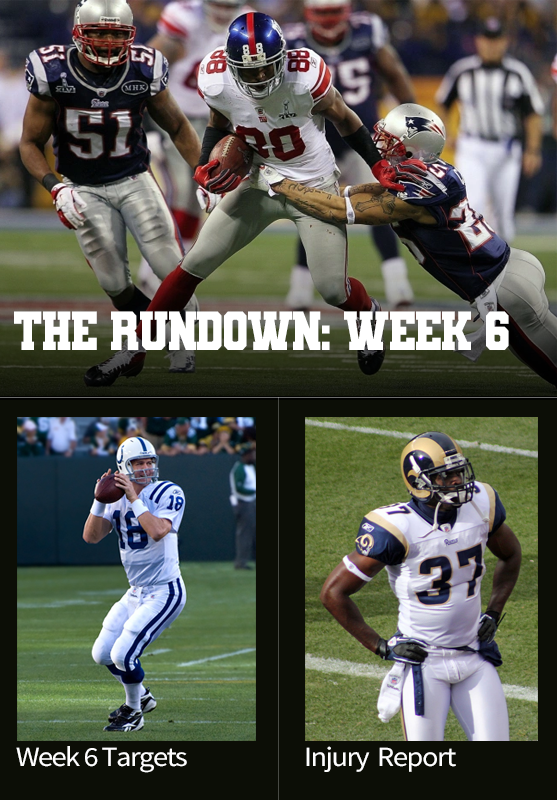
<style>
.page{position:relative;width:557px;height:800px}
.page>*{position:absolute;margin:0}
.t1{font:55px "VarsityTeamBold";letter-spacing:-0.05em;color:#ffffff;text-transform:uppercase;scale:0.92 1}
.t2{font:28px "SourceSansPro-Regular";letter-spacing:-0.05em;color:#ffffff;scale:1.09 1}
</style>
<div class="page">
<p class="t1" style="left:14px;top:311px;width:495px;height:39px">the rundown: week 6</p>
<p class="t2" style="left:16px;top:746px;width:171px;height:27px">Week 6 Targets</p>
<p class="t2" style="left:306px;top:746px;width:150px;height:26px">Injury  Report</p>
</div>
